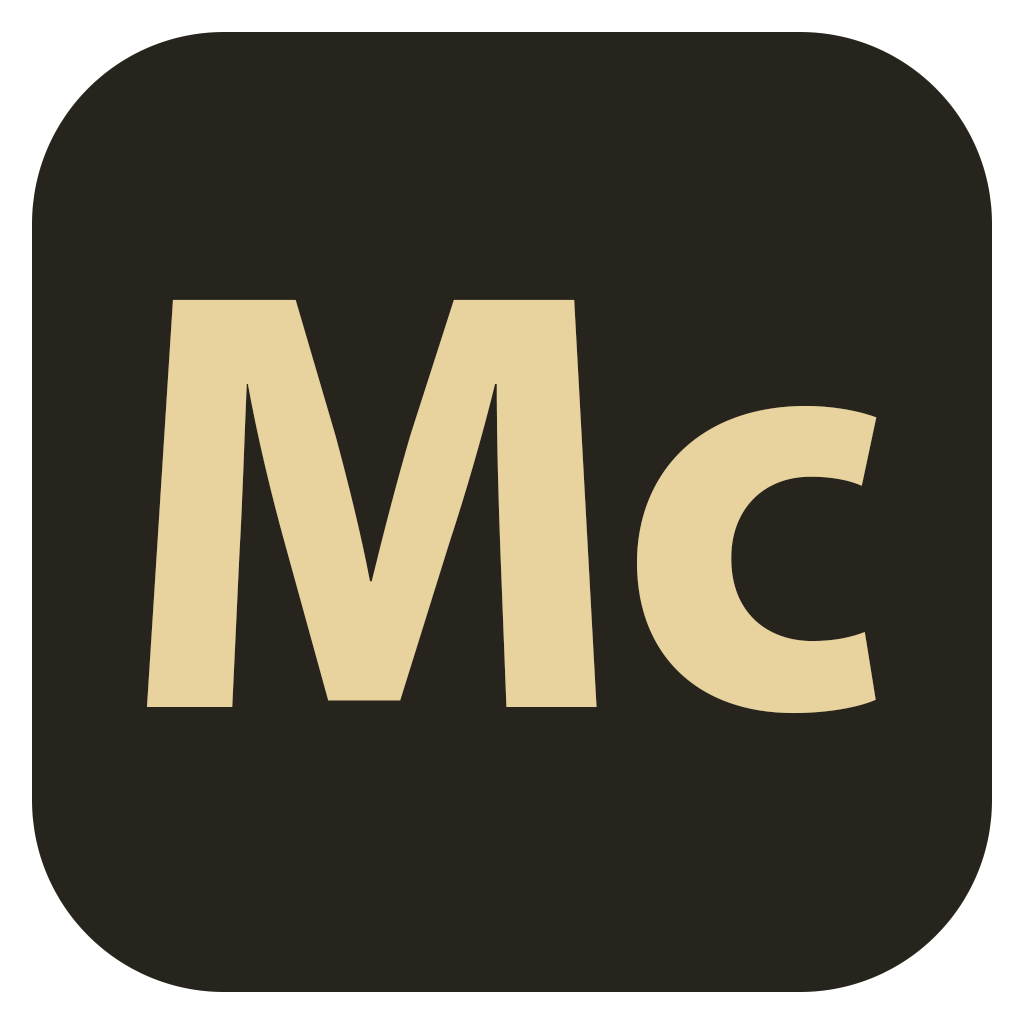
<style>
.page{position:relative;width:1024px;height:1024px;background:#27241d}
.page>*{position:absolute;margin:0}
.t1{font:604.2px "MyriadPro-Bold";letter-spacing:-0.02em;color:#e8d39f}
</style>
<div class="page">
<p class="t1" style="left:147px;top:299px;width:730px;height:415px">Mc</p>
</div>
